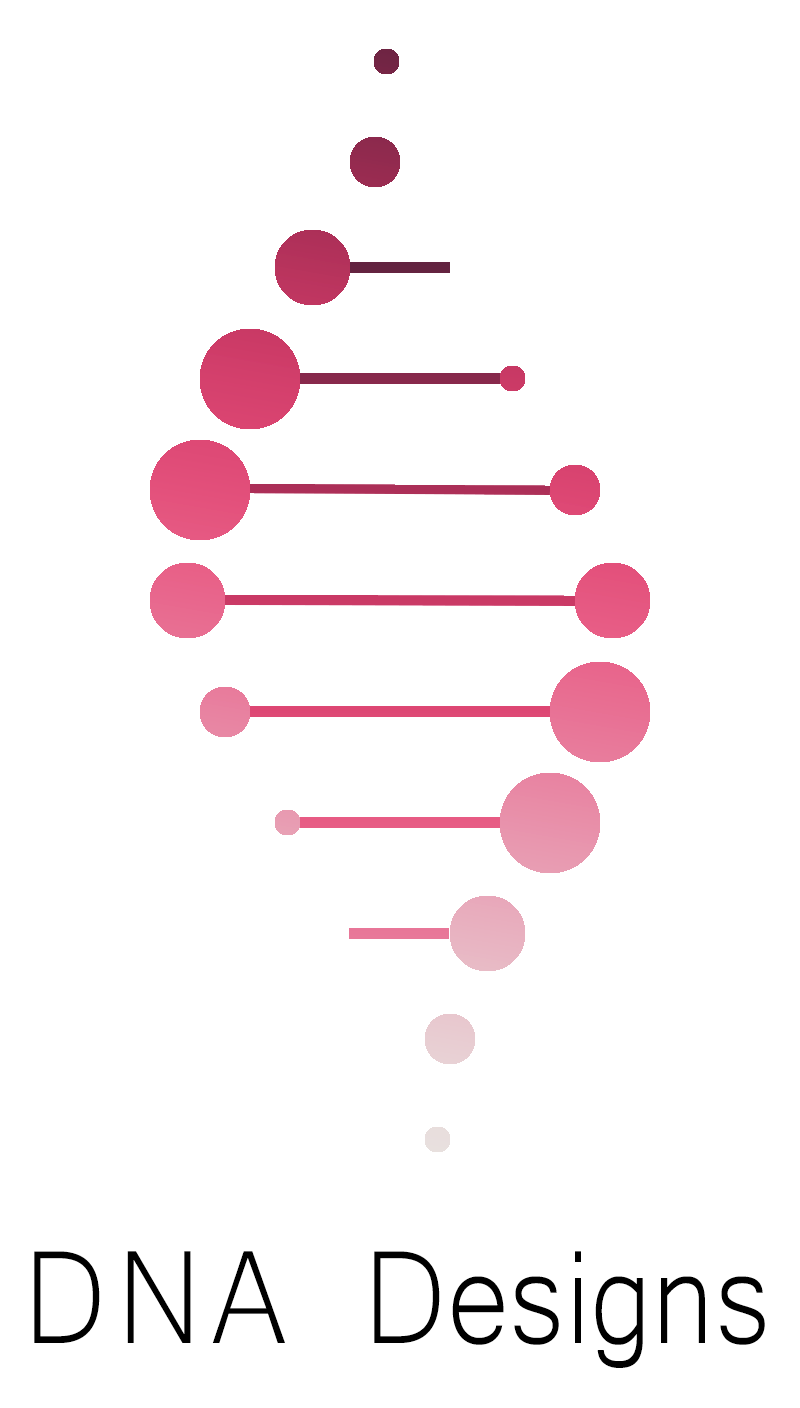
<style>
.page{position:relative;width:800px;height:1408px;background:#ffffff}
.page>*{position:absolute;margin:0}
.t1{font:171.3px "Microsoft-Yi-Baiti";color:#000000;scale:0.88 1}
.t2{font:171.3px "Microsoft-Yi-Baiti";letter-spacing:0.075em;color:#000000;scale:0.88 1}
</style>
<div class="page">
<p class="t1" style="left:34px;top:1251px;width:731px;height:117px"><span class="t2">DNA</span> Designs</p>
</div>
